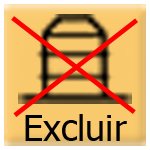
<style>
.page{position:relative;width:150px;height:150px;background:#f9ca6d}
.page>*{position:absolute;margin:0}
.t1{font:36px "Tahoma";color:#010101}
</style>
<div class="page">
<p class="t1" style="left:25px;top:114px;width:102px;height:27px">Excluir</p>
</div>
